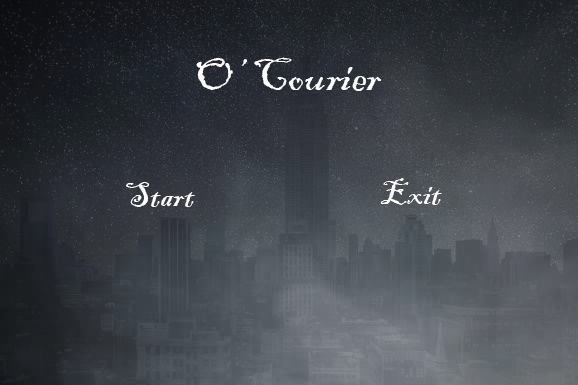
<style>
.page{position:relative;width:578px;height:385px}
.page>*{position:absolute;margin:0}
.t1{font:48px "BlackadderITC-Regular";color:#ffffff}
.t2{font:36px "BlackadderITC-Regular";color:#ffffff}
</style>
<div class="page">
<p class="t1" style="left:196px;top:57px;width:185px;height:34px">O’ Courier</p>
<p class="t2" style="left:126px;top:182px;width:69px;height:25px">Start</p>
<p class="t2" style="left:380px;top:178px;width:62px;height:27px">Exit</p>
</div>
